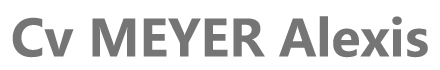
<style>
.page{position:relative;width:440px;height:70px;background:#ffffff}
.page>*{position:absolute;margin:0}
.t1{font:50px "MicrosoftYaHei-Bold";color:#757575}
</style>
<div class="page">
<p class="t1" style="left:12px;top:16px;width:416px;height:42px">Cv MEYER Alexis</p>
</div>
